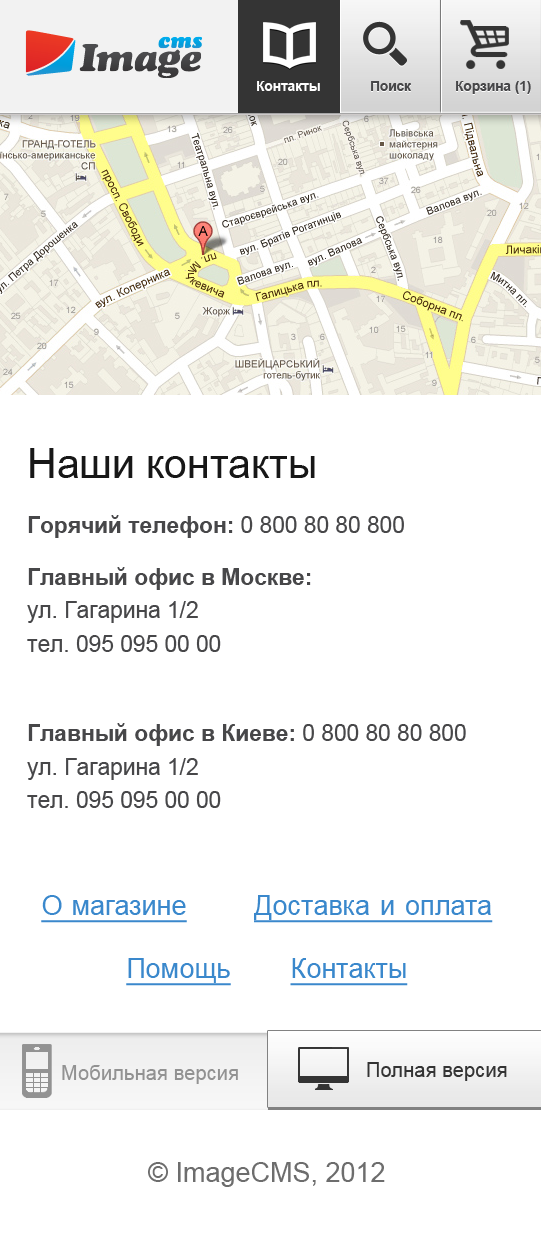
<style>
.page{position:relative;width:541px;height:1250px;background:#ffffff}
.page>*{position:absolute;margin:0}
.t1{font:13.6px "Arial-BoldMT";color:#ffffff}
.t2{font:13.6px "Arial-BoldMT";color:#474749}
.t3{font:22.7px/33.8px "ArialMT";color:#474749}
.t4{font:40.9px "ArialMT";color:#171717}
.t5{font:22.7px/54.9px "Arial-BoldMT";color:#474749}
.t6{font:22.7px/54.9px "ArialMT";color:#474749}
.t7{font:22.7px/51.8px "Arial-BoldMT";color:#474749}
.t8{font:27px/63px "ArialMT";color:#3a88cc;text-decoration:underline}
.t9{font:20.3px "ArialMT";color:#343434}
.t10{font:20.3px "ArialMT";color:#929292}
.t11{font:27px "ArialMT";color:#6d6d6d}
</style>
<div class="page">
<p class="t1" style="left:257px;top:81px;width:63px;height:10px">Контакты</p>
<p class="t2" style="left:371px;top:81px;width:40px;height:10px">Поиск</p>
<p class="t2" style="left:456px;top:81px;width:75px;height:13px">Корзина (1)</p>
<p class="t3" style="left:27px;top:448px;width:439px;height:360px"><span class="t4">Наши контакты<br></span><span class="t5">Горячий телефон:</span><span class="t6"> 0 800 80 80 800<br></span><span class="t7">Главный офис в Москве:<br></span>ул. Гагарина 1/2<br>тел. 095 095 00 00<br><br><span class="t5">Главный офис в Киеве:</span><span class="t6"> 0 800 80 80 800<br></span>ул. Гагарина 1/2<br>тел. 095 095 00 00</p>
<p class="t8" style="left:41px;top:895px;width:452px;height:91px;text-align:center">Омагазине         Доставкаиоплата           <br>Помощь        Контакты</p>
<p class="t9" style="left:367px;top:1062px;width:140px;height:19px">Полная версия</p>
<p class="t10" style="left:62px;top:1065px;width:176px;height:19px">Мобильная версия</p>
<p class="t11" style="left:148px;top:1162px;width:237px;height:25px">© ImageCMS, 2012</p>
</div>
